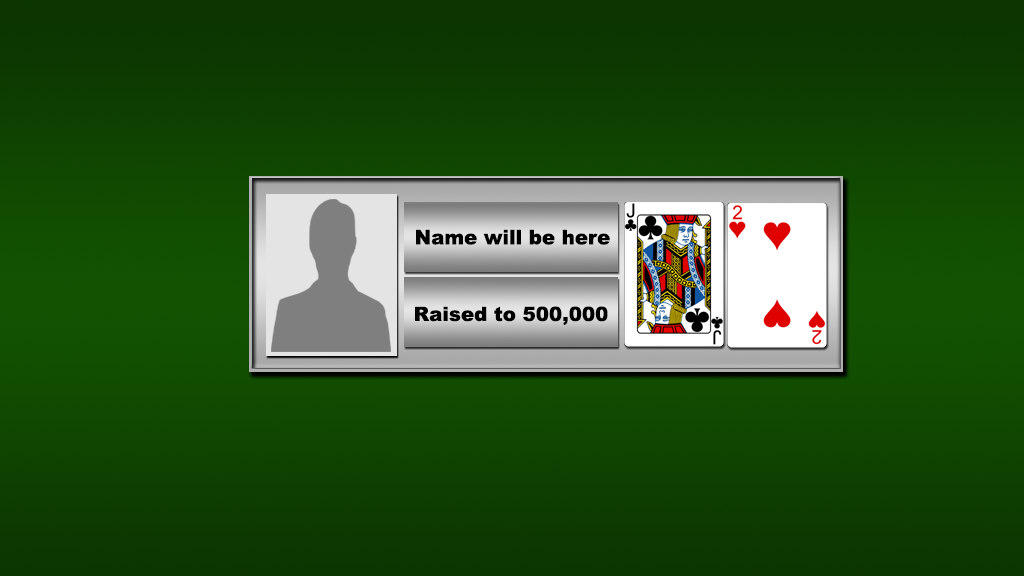
<style>
.page{position:relative;width:1024px;height:576px}
.page>*{position:absolute;margin:0}
.t1{font:20px "Arial-Black";color:#000000}
.t2{font:19.7px "Arial-Black";color:#000000}
</style>
<div class="page">
<p class="t1" style="left:416px;top:229px;width:194px;height:16px">Name will be here</p>
<p class="t2" style="left:415px;top:306px;width:193px;height:19px">Raised to 500,000</p>
</div>
